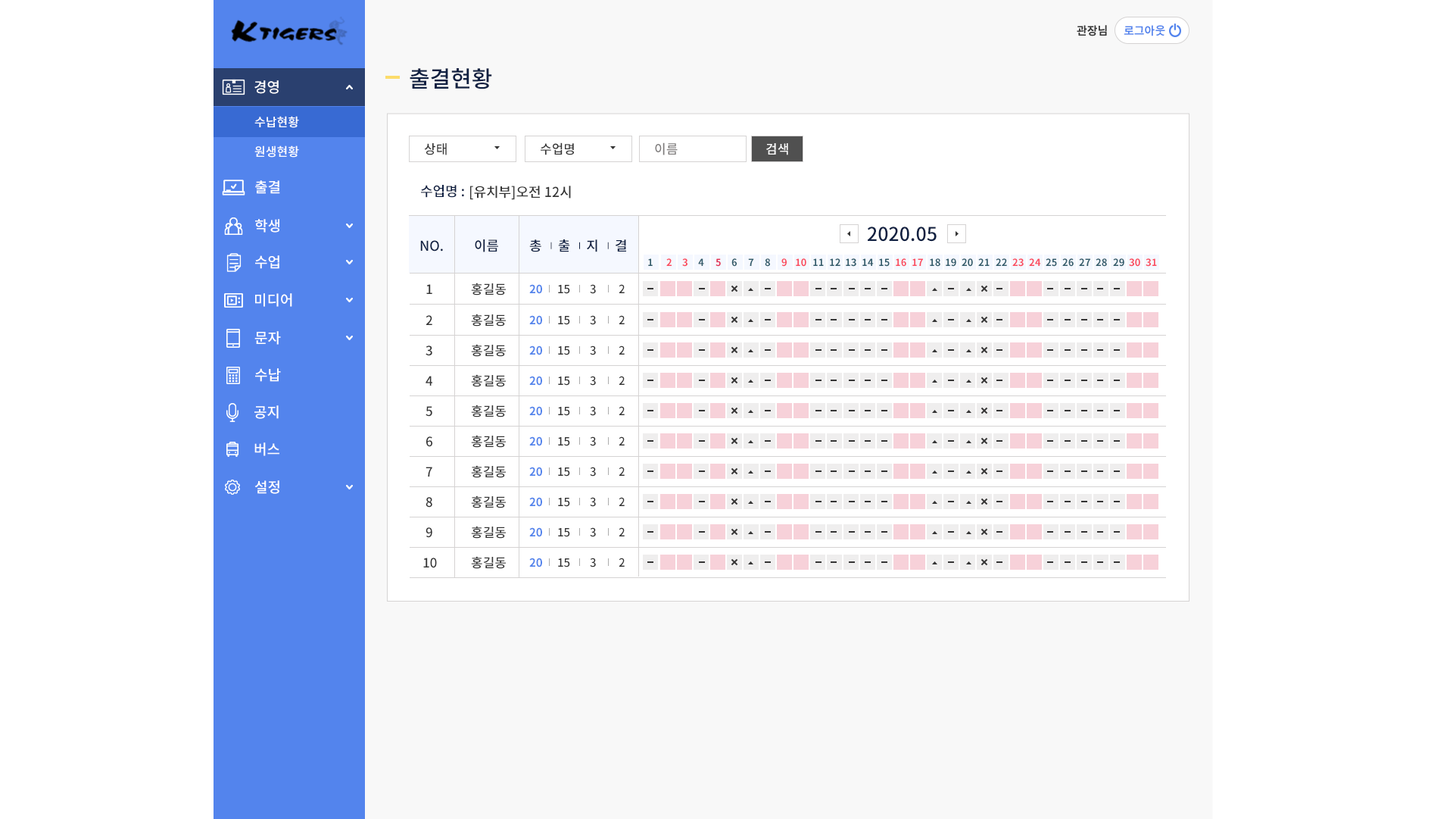
<style>
.page{position:relative;width:1456px;height:819px;background:#ffffff}
.page>*{position:absolute;margin:0}
.t1{font:22.7px "NotoSansCJKkr-Medium";color:#102042;text-transform:uppercase}
.t2{font:12.9px "NotoSansCJKkr-Medium";color:#343434;text-transform:uppercase}
.t3{font:12.9px "NotoSansCJKkr-Medium";color:#7d7a7a;text-transform:uppercase}
.t4{font:12.9px "NotoSansCJKkr-Medium";color:#ffffff;text-transform:uppercase}
.t5{font:13.6px "NotoSansCJKkr-Medium";color:#102042;text-transform:uppercase}
.t6{font:13.6px "NotoSansCJKkr-Medium";color:#343434;text-transform:uppercase}
.t7{font:18.9px "NotoSansCJKkr-Medium";color:#102042;text-transform:uppercase}
.t8{font:13.6px "NotoSansCJKkr-Medium";letter-spacing:0.1em;color:#102042;text-transform:uppercase}
.t9{font:7.6px "NotoSansCJKkr-Medium";letter-spacing:0.1em;color:#102042;text-transform:uppercase}
.t10{font:9.8px "NotoSansCJKkr-Bold";letter-spacing:0.1em;color:#315b6a;text-transform:uppercase}
.t11{font:9.8px "NotoSansCJKkr-Bold";letter-spacing:0.1em;color:#fa4b5e;text-transform:uppercase}
.t12{font:9.8px "NotoSansCJKkr-Bold";letter-spacing:0.1em;color:#e32f55;text-transform:uppercase}
.t13{font:9.8px "NotoSansCJKkr-Bold";color:#fa4b5e;text-transform:uppercase}
.t14{font:9.8px "NotoSansCJKkr-Bold";color:#315b6a;text-transform:uppercase}
.t15{font:11.4px "NotoSansCJKkr-Bold";color:#5485ec;text-transform:uppercase}
.t16{font:11.4px "NotoSansCJKkr-Medium";color:#343434;text-transform:uppercase}
</style>
<div class="page">
<p class="t1" style="left:410px;top:68px;width:82px;height:21px">출결현황</p>
<p class="t2" style="left:424px;top:143px;width:23px;height:12px">상태</p>
<p class="t2" style="left:541px;top:142px;width:33px;height:13px">수업명</p>
<p class="t3" style="left:655px;top:142px;width:23px;height:13px">이름</p>
<p class="t4" style="left:766px;top:143px;width:22px;height:12px">검색</p>
<p class="t5" style="left:421px;top:185px;width:43px;height:13px">수업명 :</p>
<p class="t6" style="left:470px;top:186px;width:101px;height:14px">[유치부]오전 12시</p>
<p class="t7" style="left:868px;top:226px;width:69px;height:16px">2020.05</p>
<p class="t5" style="left:420px;top:240px;width:23px;height:11px">No.</p>
<p class="t5" style="left:475px;top:239px;width:23px;height:13px">이름</p>
<p class="t8" style="left:529px;top:239px;width:97px;height:13px">총 <span class="t9">ㅣ </span>출 <span class="t9">ㅣ </span>지 <span class="t9">ㅣ </span>결</p>
<p class="t10" style="left:648px;top:258px;width:5px;height:8px">1</p>
<p class="t11" style="left:666px;top:258px;width:6px;height:8px">2</p>
<p class="t11" style="left:682px;top:258px;width:6px;height:9px">3</p>
<p class="t10" style="left:698px;top:258px;width:6px;height:8px">4</p>
<p class="t12" style="left:716px;top:258px;width:5px;height:9px">5</p>
<p class="t10" style="left:732px;top:258px;width:5px;height:9px">6</p>
<p class="t10" style="left:748px;top:258px;width:6px;height:8px">7</p>
<p class="t10" style="left:765px;top:258px;width:5px;height:9px">8</p>
<p class="t11" style="left:782px;top:258px;width:5px;height:9px">9</p>
<p class="t13" style="left:796px;top:258px;width:11px;height:9px">10</p>
<p class="t14" style="left:813px;top:258px;width:11px;height:8px">11</p>
<p class="t14" style="left:830px;top:258px;width:11px;height:8px">12</p>
<p class="t14" style="left:846px;top:258px;width:11px;height:9px">13</p>
<p class="t14" style="left:863px;top:258px;width:11px;height:8px">14</p>
<p class="t14" style="left:879px;top:258px;width:11px;height:9px">15</p>
<p class="t13" style="left:896px;top:258px;width:11px;height:9px">16</p>
<p class="t13" style="left:913px;top:258px;width:10px;height:8px">17</p>
<p class="t14" style="left:930px;top:258px;width:11px;height:9px">18</p>
<p class="t14" style="left:946px;top:258px;width:11px;height:9px">19</p>
<p class="t14" style="left:962px;top:258px;width:11px;height:9px">20</p>
<p class="t14" style="left:979px;top:258px;width:11px;height:8px">21</p>
<p class="t14" style="left:996px;top:258px;width:11px;height:8px">22</p>
<p class="t13" style="left:1013px;top:258px;width:11px;height:9px">23</p>
<p class="t13" style="left:1029px;top:258px;width:12px;height:8px">24</p>
<p class="t14" style="left:1046px;top:258px;width:11px;height:9px">25</p>
<p class="t14" style="left:1063px;top:258px;width:11px;height:9px">26</p>
<p class="t14" style="left:1079px;top:258px;width:12px;height:8px">27</p>
<p class="t14" style="left:1096px;top:258px;width:11px;height:9px">28</p>
<p class="t14" style="left:1113px;top:258px;width:12px;height:9px">29</p>
<p class="t13" style="left:1129px;top:258px;width:12px;height:9px">30</p>
<p class="t13" style="left:1146px;top:258px;width:11px;height:9px">31</p>
<p class="t2" style="left:426px;top:284px;width:6px;height:10px">1</p>
<p class="t2" style="left:471px;top:283px;width:35px;height:12px">홍길동</p>
<p class="t15" style="left:529px;top:284px;width:13px;height:10px">20</p>
<p class="t16" style="left:558px;top:285px;width:12px;height:9px">15</p>
<p class="t16" style="left:590px;top:284px;width:6px;height:10px">3</p>
<p class="t16" style="left:619px;top:284px;width:6px;height:9px">2</p>
<p class="t2" style="left:426px;top:315px;width:6px;height:10px">2</p>
<p class="t2" style="left:471px;top:314px;width:35px;height:12px">홍길동</p>
<p class="t15" style="left:529px;top:315px;width:13px;height:10px">20</p>
<p class="t16" style="left:558px;top:316px;width:12px;height:9px">15</p>
<p class="t16" style="left:590px;top:315px;width:6px;height:10px">3</p>
<p class="t16" style="left:619px;top:315px;width:6px;height:9px">2</p>
<p class="t2" style="left:426px;top:345px;width:6px;height:11px">3</p>
<p class="t2" style="left:471px;top:344px;width:35px;height:13px">홍길동</p>
<p class="t15" style="left:529px;top:345px;width:13px;height:10px">20</p>
<p class="t16" style="left:558px;top:346px;width:12px;height:9px">15</p>
<p class="t16" style="left:590px;top:345px;width:6px;height:10px">3</p>
<p class="t16" style="left:619px;top:345px;width:6px;height:9px">2</p>
<p class="t2" style="left:426px;top:376px;width:6px;height:10px">4</p>
<p class="t2" style="left:471px;top:374px;width:35px;height:13px">홍길동</p>
<p class="t15" style="left:529px;top:376px;width:13px;height:10px">20</p>
<p class="t16" style="left:558px;top:376px;width:12px;height:10px">15</p>
<p class="t16" style="left:590px;top:376px;width:6px;height:10px">3</p>
<p class="t16" style="left:619px;top:376px;width:6px;height:9px">2</p>
<p class="t2" style="left:426px;top:406px;width:6px;height:11px">5</p>
<p class="t2" style="left:471px;top:404px;width:35px;height:13px">홍길동</p>
<p class="t15" style="left:529px;top:406px;width:13px;height:10px">20</p>
<p class="t16" style="left:558px;top:407px;width:12px;height:9px">15</p>
<p class="t16" style="left:590px;top:406px;width:6px;height:10px">3</p>
<p class="t16" style="left:619px;top:406px;width:6px;height:9px">2</p>
<p class="t2" style="left:426px;top:436px;width:6px;height:11px">6</p>
<p class="t2" style="left:471px;top:435px;width:35px;height:13px">홍길동</p>
<p class="t15" style="left:529px;top:436px;width:13px;height:10px">20</p>
<p class="t16" style="left:558px;top:437px;width:12px;height:9px">15</p>
<p class="t16" style="left:590px;top:436px;width:6px;height:10px">3</p>
<p class="t16" style="left:619px;top:436px;width:6px;height:9px">2</p>
<p class="t2" style="left:426px;top:467px;width:6px;height:9px">7</p>
<p class="t2" style="left:471px;top:465px;width:35px;height:13px">홍길동</p>
<p class="t15" style="left:529px;top:467px;width:13px;height:9px">20</p>
<p class="t16" style="left:558px;top:467px;width:12px;height:9px">15</p>
<p class="t16" style="left:590px;top:467px;width:6px;height:9px">3</p>
<p class="t16" style="left:619px;top:467px;width:6px;height:9px">2</p>
<p class="t2" style="left:426px;top:497px;width:6px;height:10px">8</p>
<p class="t2" style="left:471px;top:495px;width:35px;height:13px">홍길동</p>
<p class="t15" style="left:529px;top:497px;width:13px;height:10px">20</p>
<p class="t16" style="left:558px;top:498px;width:12px;height:9px">15</p>
<p class="t16" style="left:590px;top:497px;width:6px;height:10px">3</p>
<p class="t16" style="left:619px;top:497px;width:6px;height:9px">2</p>
<p class="t2" style="left:426px;top:527px;width:6px;height:11px">9</p>
<p class="t2" style="left:471px;top:526px;width:35px;height:12px">홍길동</p>
<p class="t15" style="left:529px;top:527px;width:13px;height:10px">20</p>
<p class="t16" style="left:558px;top:528px;width:12px;height:9px">15</p>
<p class="t16" style="left:590px;top:527px;width:6px;height:10px">3</p>
<p class="t16" style="left:619px;top:527px;width:6px;height:9px">2</p>
<p class="t2" style="left:423px;top:557px;width:14px;height:11px">10</p>
<p class="t2" style="left:471px;top:556px;width:35px;height:13px">홍길동</p>
<p class="t15" style="left:529px;top:557px;width:13px;height:10px">20</p>
<p class="t16" style="left:590px;top:557px;width:6px;height:10px">3</p>
<p class="t16" style="left:619px;top:557px;width:6px;height:10px">2</p>
<p class="t16" style="left:558px;top:558px;width:12px;height:9px">15</p>
</div>
